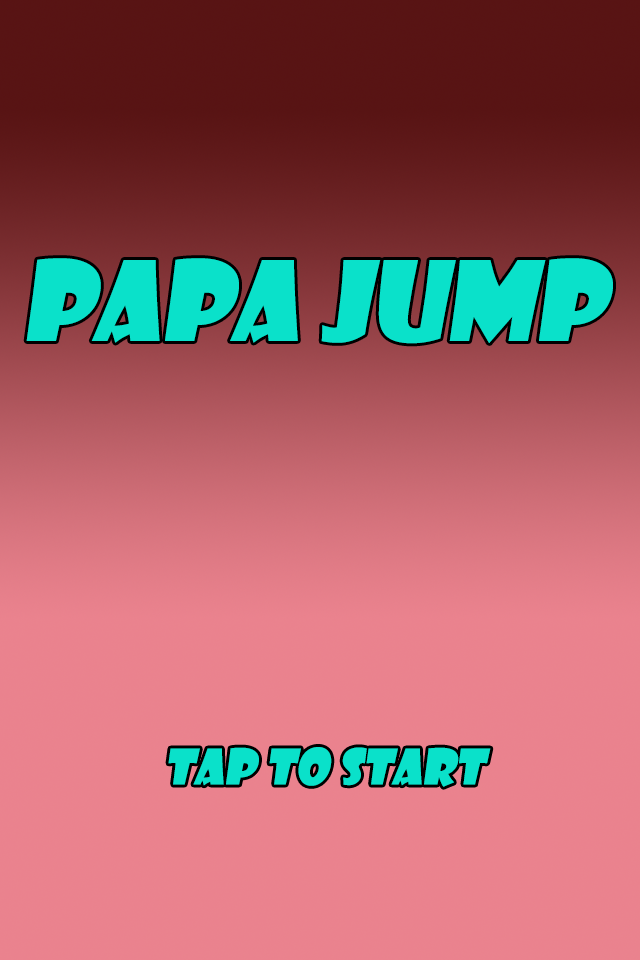
<style>
.page{position:relative;width:640px;height:960px}
.page>*{position:absolute;margin:0}
.t1{font:108px "ShowcardGothic-Reg";color:#0ae1ca;font-style:italic}
.t2{font:48px "ShowcardGothic-Reg";color:#0ae1ca;font-style:italic}
</style>
<div class="page">
<p class="t1" style="left:26px;top:258px;width:587px;height:86px">Papa jump</p>
<p class="t2" style="left:168px;top:747px;width:323px;height:40px">tap to Start</p>
</div>
